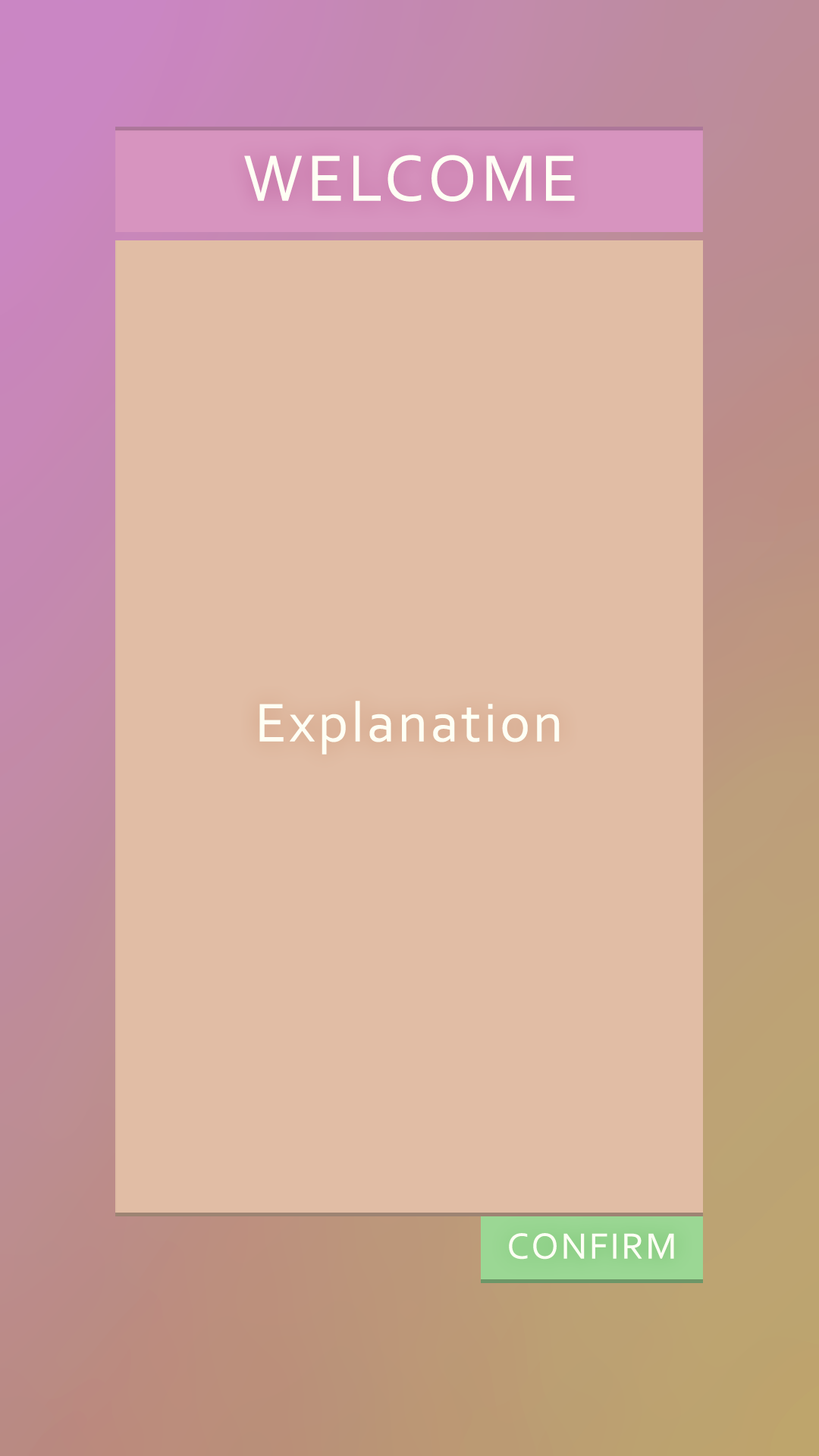
<style>
.page{position:relative;width:819px;height:1456px;background:#e1bda5}
.page>*{position:absolute;margin:0}
.t1{font:68.2px "Corbel";letter-spacing:0.05em;color:#fefff4}
.t2{font:56.9px "Corbel";letter-spacing:0.05em;color:#fefff4}
.t3{font:37.9px "Corbel";letter-spacing:0.05em;color:#fefff4}
</style>
<div class="page">
<p class="t1" style="left:244px;top:155px;width:331px;height:47px">WELCOME</p>
<p class="t2" style="left:259px;top:701px;width:301px;height:54px">Explanation</p>
<p class="t3" style="left:509px;top:1233px;width:165px;height:27px">CONFIRM</p>
</div>
